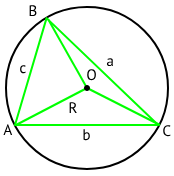
<style>
.page{position:relative;width:174px;height:176px;background:#ffffff}
.page>*{position:absolute;margin:0}
.t1{font:15.2px "PTSans-Regular";color:#000000}
</style>
<div class="page">
<p class="t1" style="left:29px;top:5px;width:8px;height:12px">B</p>
<p class="t1" style="left:20px;top:65px;width:6px;height:9px">c</p>
<p class="t1" style="left:106px;top:58px;width:7px;height:9px">a</p>
<p class="t1" style="left:87px;top:69px;width:9px;height:12px">O</p>
<p class="t1" style="left:69px;top:102px;width:8px;height:11px">R</p>
<p class="t1" style="left:3px;top:124px;width:10px;height:11px">A</p>
<p class="t1" style="left:163px;top:125px;width:8px;height:12px">C</p>
<p class="t1" style="left:83px;top:129px;width:7px;height:12px">b</p>
</div>
